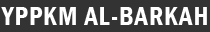
<style>
.page{position:relative;width:210px;height:32px;background:#333333}
.page>*{position:absolute;margin:0}
.t1{font:26px "FranklinGothic-DemiCond";letter-spacing:0.04em;color:#ffffff}
</style>
<div class="page">
<p class="t1" style="left:1px;top:7px;width:206px;height:18px">YPPKM AL-BARKAH</p>
</div>
